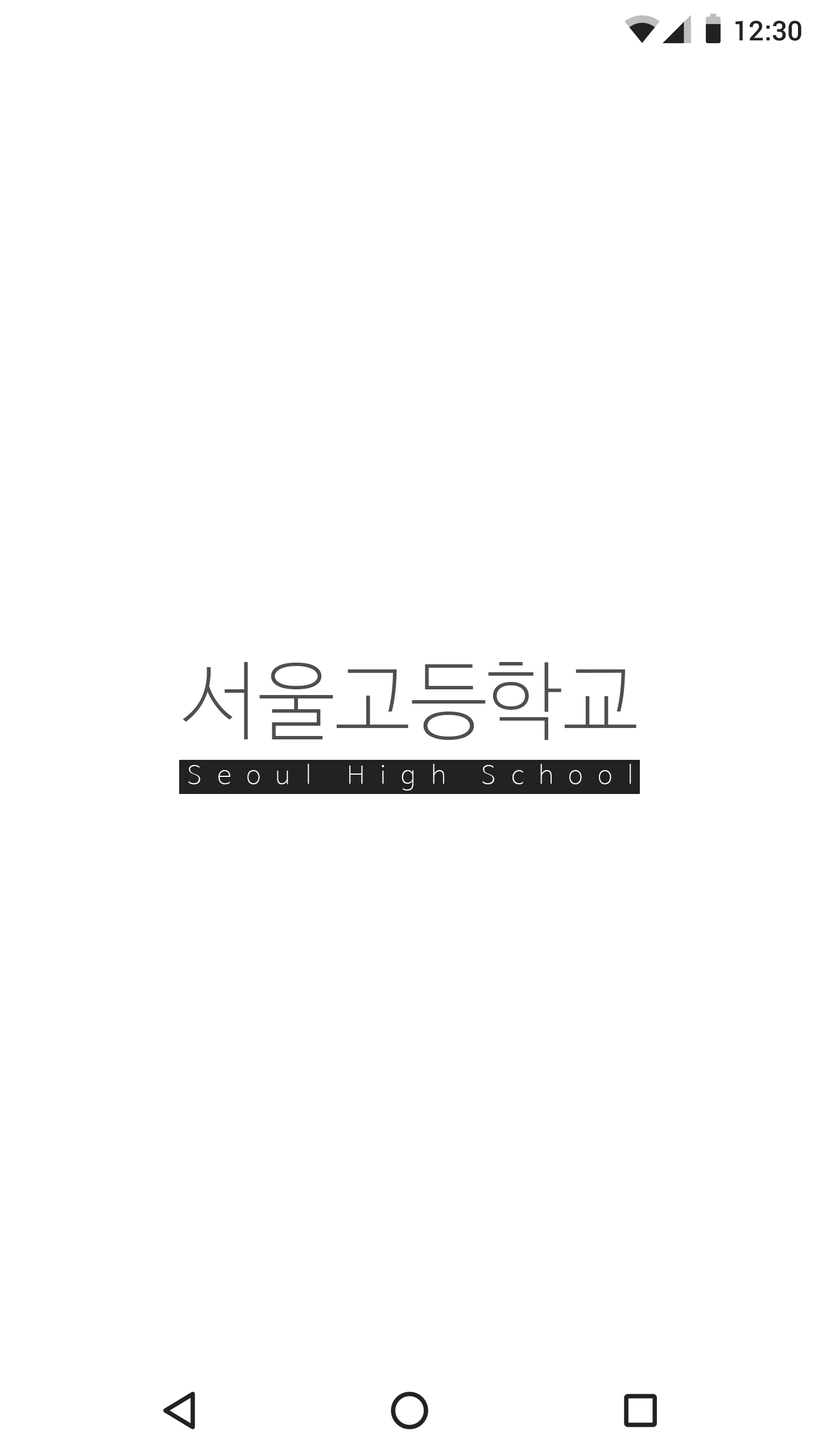
<style>
.page{position:relative;width:819px;height:1456px;background:#ffffff}
.page>*{position:absolute;margin:0}
.t1{font:27.3px "Roboto-Medium";color:#222222}
.t2{font:85.3px "NanumBarunGothicUltraLight";color:#4f4f4f}
.t3{font:25px "NanumBarunGothicUltraLight";letter-spacing:0.6em;color:#ffffff}
</style>
<div class="page">
<p class="t1" style="left:735px;top:20px;width:66px;height:21px">12:30</p>
<p class="t2" style="left:183px;top:662px;width:453px;height:78px">서울고등학교</p>
<p class="t3" style="left:188px;top:764px;width:443px;height:27px">Seoul High School</p>
</div>
